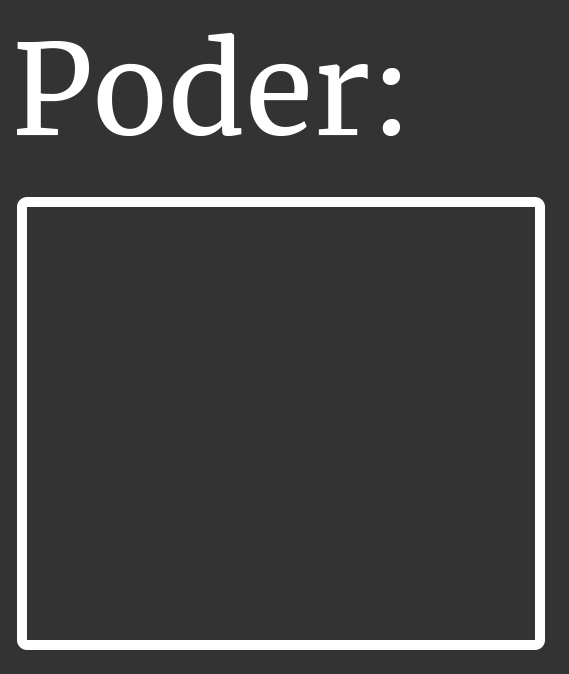
<style>
.page{position:relative;width:569px;height:674px;background:#333333}
.page>*{position:absolute;margin:0}
.t1{font:125px "Merriweather-Regular";color:#ffffff}
</style>
<div class="page">
<p class="t1" style="left:17px;top:32px;width:383px;height:104px">Poder:</p>
</div>
